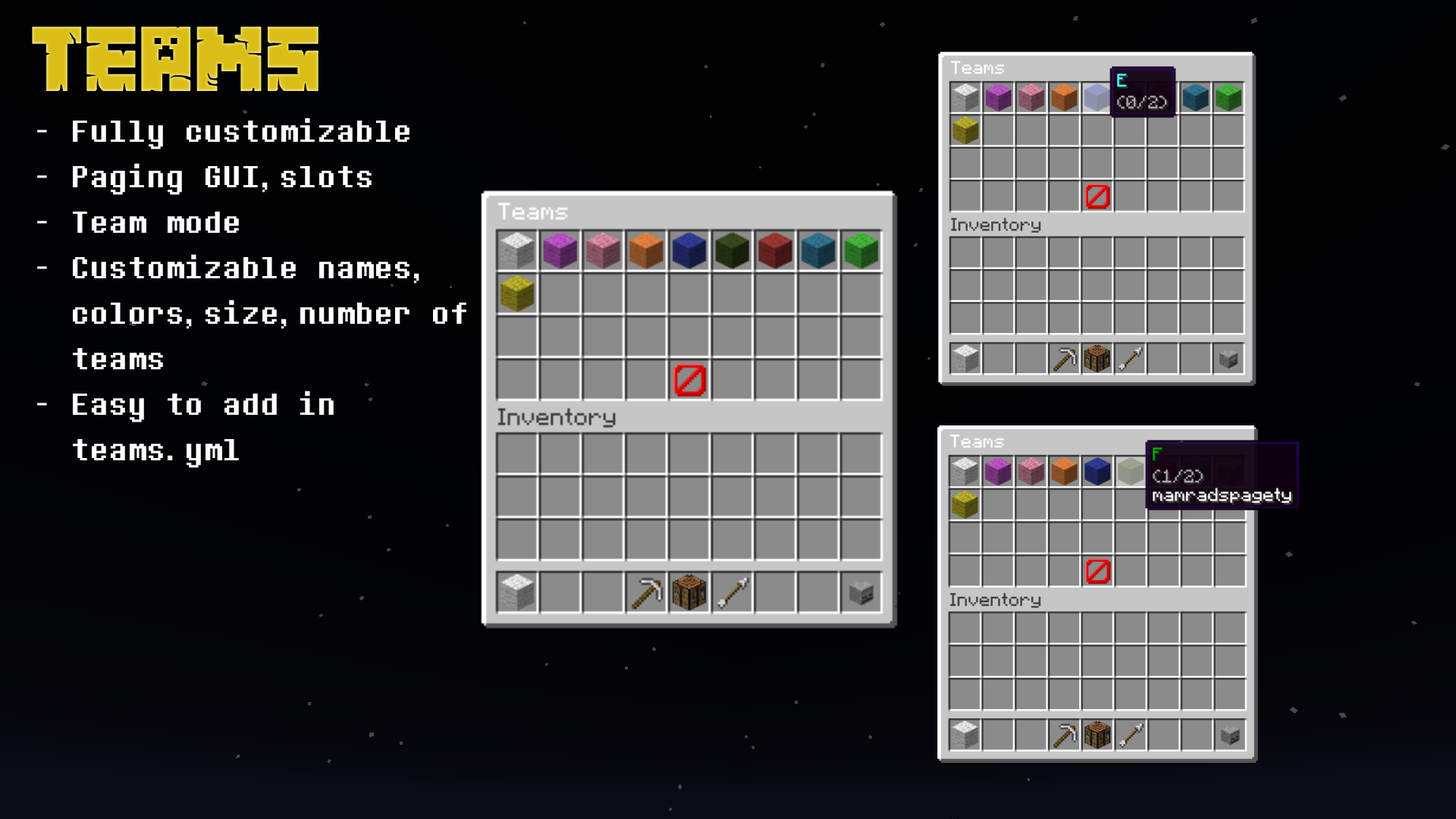
<style>
.page{position:relative;width:1456px;height:819px}
.page>*{position:absolute;margin:0}
.t1{font:81.9px "MinecrafterAlt";color:#dbbe15}
.t2{font:37.9px "DeterminationMonoWeb";color:#ffffff}
</style>
<div class="page">
<p class="t1" style="left:32px;top:27px;width:286px;height:65px">teams</p>
<p class="t2" style="left:37px;top:118px;width:429px;height:350px">- Fully customizable<br>- Paging GUI,slots<br>- Team mode<br>- Customizable names,<br>  colors,size,number of<br>  teams<br>- Easy to add in <br>  teams.yml</p>
</div>
